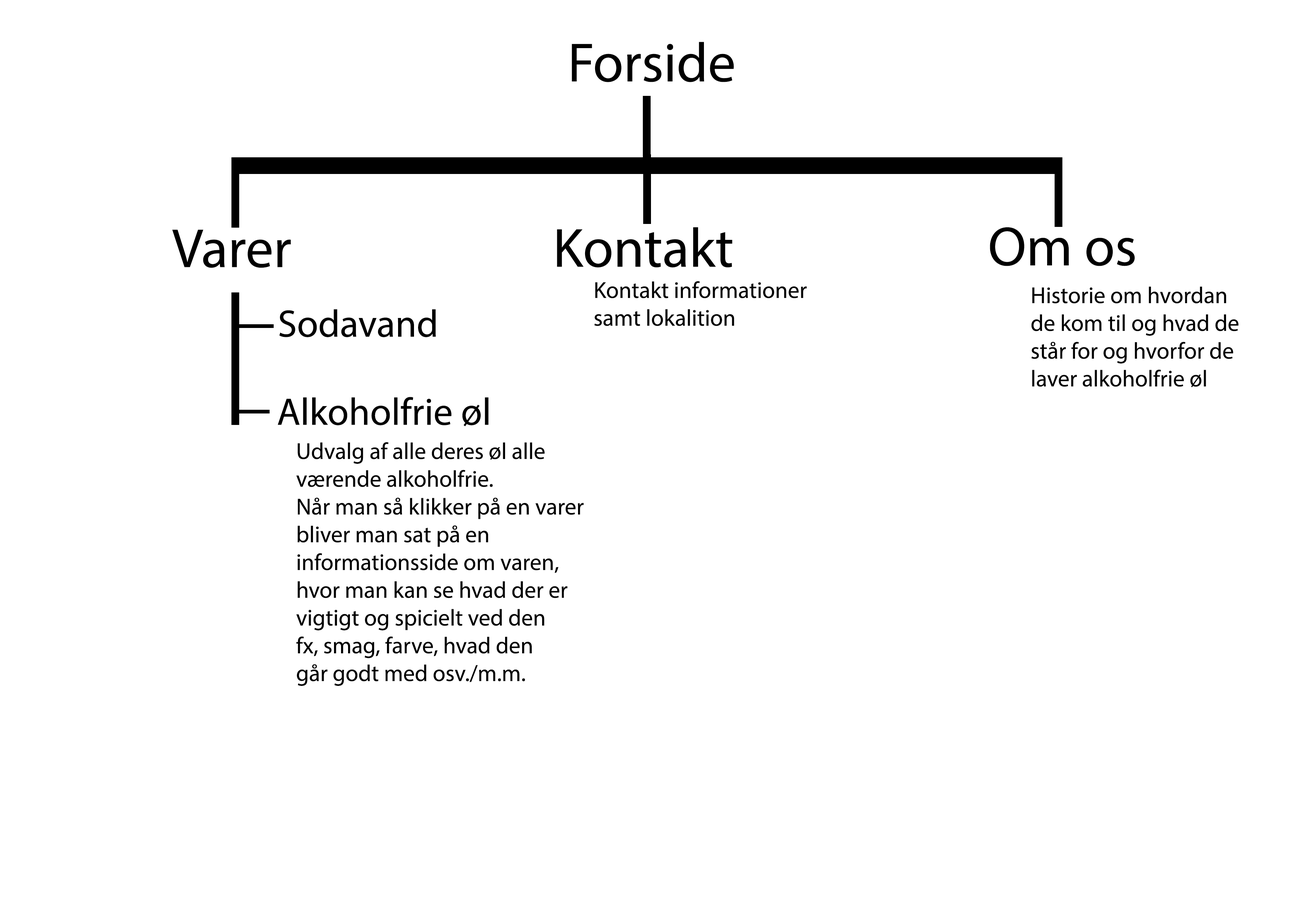
<style>
.page{position:relative;width:1299px;height:918px;background:#ffffff}
.page>*{position:absolute;margin:0}
.t1{font:55.5px "MyriadPro-Regular";color:#000000}
.t2{font:23.1px "MyriadPro-Regular";color:#000000}
.t3{font:38.6px "MyriadPro-Regular";color:#000000}
</style>
<div class="page">
<p class="t1" style="left:572px;top:42px;width:162px;height:40px">Forside</p>
<p class="t1" style="left:172px;top:230px;width:119px;height:38px">Varer</p>
<p class="t1" style="left:557px;top:227px;width:175px;height:41px">Kontakt</p>
<p class="t1" style="left:990px;top:227px;width:145px;height:39px">Om os</p>
<p class="t2" style="left:594px;top:281px;width:213px;height:45px">Kontakt informationer<br>samt lokalition</p>
<p class="t2" style="left:1031px;top:287px;width:207px;height:101px">Historie om hvordan<br>de kom til og hvad de<br>står for og hvorfor de<br>laver alkoholfrie øl</p>
<p class="t3" style="left:279px;top:309px;width:157px;height:28px">Sodavand</p>
<p class="t3" style="left:278px;top:397px;width:210px;height:29px">Alkoholfrie øl</p>
<p class="t2" style="left:296px;top:442px;width:287px;height:244px">Udvalg af alle deres øl alle<br>værende alkoholfrie.<br>Når man så klikker på en varer<br>bliver man sat på en<br>informationsside om varen,<br>hvor man kan se hvad der er<br>vigtigt og spicielt ved den<br>fx, smag, farve, hvad den<br>går godt med osv./m.m.</p>
</div>
